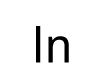
<style>
.page{position:relative;width:105px;height:83px;background:#ffffff}
.page>*{position:absolute;margin:0}
.t1{font:47.9px "DroidSans";color:#000000}
</style>
<div class="page">
<p class="t1" style="left:36px;top:26px;width:33px;height:37px">ln</p>
</div>
